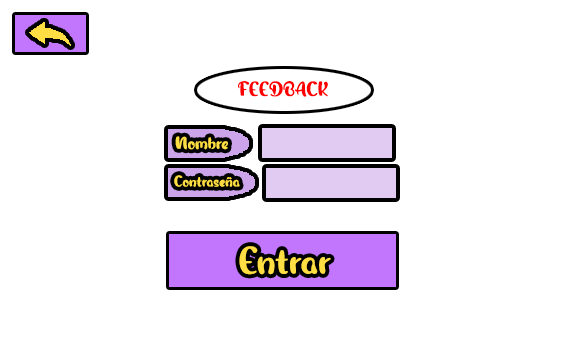
<style>
.page{position:relative;width:566px;height:364px;background:#ffffff}
.page>*{position:absolute;margin:0}
.t1{font:21.3px "MagicOwl-PersonalUse";color:#ff0000}
.t2{font:18.7px "MagicOwl-PersonalUse";color:#ffde43}
.t3{font:16px "MagicOwl-PersonalUse";color:#ffde43}
.t4{font:40px "MagicOwl-PersonalUse";color:#ffde43}
</style>
<div class="page">
<p class="t1" style="left:238px;top:81px;width:90px;height:16px">FEEDBACK</p>
<p class="t2" style="left:175px;top:136px;width:53px;height:14px">Nombre</p>
<p class="t3" style="left:174px;top:175px;width:66px;height:12px">Contraseña</p>
<p class="t4" style="left:239px;top:246px;width:92px;height:29px">Entrar</p>
</div>
